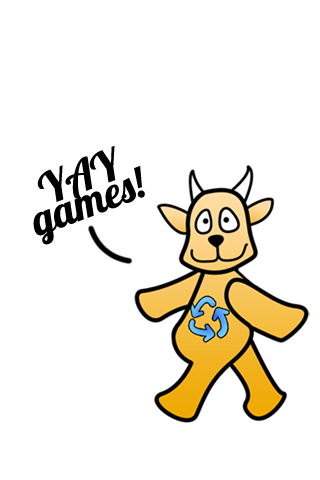
<style>
.page{position:relative;width:320px;height:480px;background:#ffffff}
.page>*{position:absolute;margin:0}
.t1{font:43px/25.8px "Lobster1.4";color:#000000}
</style>
<div class="page">
<p class="t1" style="left:33px;top:146px;width:112px;height:99px;text-align:center;rotate:-20deg">YAY<br>games!</p>
</div>
